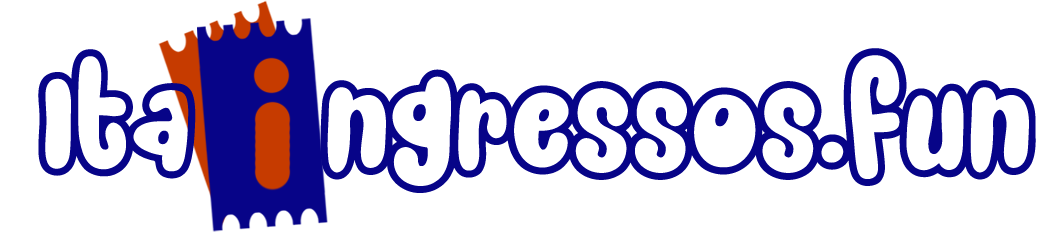
<style>
.page{position:relative;width:1042px;height:237px;background:#ffffff}
.page>*{position:absolute;margin:0}
.t1{font:168.8px "SnackerComicPersonalUseOnly";color:#070488}
</style>
<div class="page">
<p class="t1" style="left:38px;top:48px;width:998px;height:145px">Ita   ngressos.fun</p>
</div>
